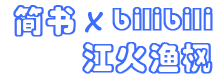
<style>
.page{position:relative;width:220px;height:80px;background:#ffffff}
.page>*{position:absolute;margin:0}
.t1{font:32px/37.8px "STCaiyun";color:#3c6efd;font-weight:bold}
.t2{font:32px/37.8px "SegoePrint";color:#3c6efd;font-weight:bold}
</style>
<div class="page">
<p class="t1" style="left:13px;top:5px;width:200px;height:69px">简书 <span class="t2">x</span> bilibili<br>        江火渔枫</p>
</div>
